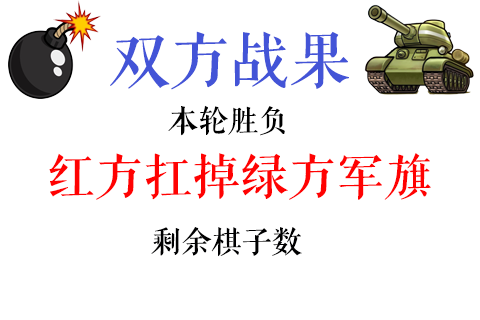
<style>
.page{position:relative;width:480px;height:320px;background:#ffffff}
.page>*{position:absolute;margin:0}
.t1{font:60px "FZQKBYSJW--GB1-0";color:#4354d7;text-transform:uppercase}
.t2{font:30px "FZQKBYSJW--GB1-0";color:#000000;text-transform:uppercase}
.t3{font:48px "FZQKBYSJW--GB1-0";color:#ff0202;text-transform:uppercase}
.t4{font:30px "FZQKBYSJW--GB1-0";color:#000001;text-transform:uppercase}
</style>
<div class="page">
<p class="t1" style="left:110px;top:31px;width:239px;height:59px">双方战果</p>
<p class="t2" style="left:168px;top:105px;width:117px;height:31px">本轮胜负</p>
<p class="t3" style="left:49px;top:153px;width:382px;height:47px">红方扛掉绿方军旗</p>
<p class="t4" style="left:151px;top:227px;width:151px;height:30px">剩余棋子数</p>
</div>
